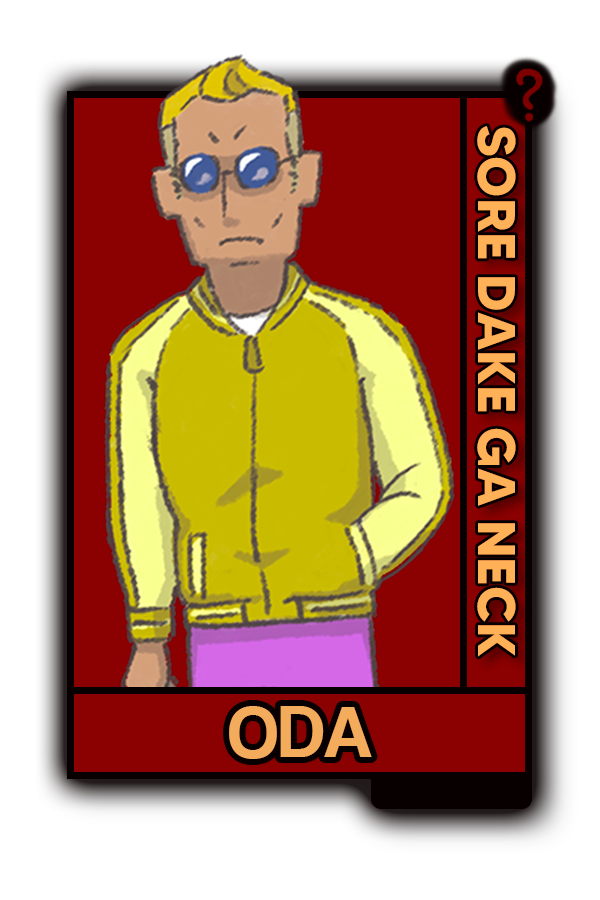
<style>
.page{position:relative;width:600px;height:900px;background:#8b0000}
.page>*{position:absolute;margin:0}
.t1{font:52.7px "MADETOMMY-Bold";color:#ffb158}
.t2{font:75px "CoolveticaRg-Regular";color:#f3ac5c}
</style>
<div class="page">
<p class="t1" style="left:477px;top:126px;width:39px;height:531px;rotate:90deg">SORE DAKE GA NECK</p>
<p class="t2" style="left:229px;top:706px;width:143px;height:53px">ODA</p>
</div>
